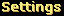
<style>
.page{position:relative;width:64px;height:16px;background:#000000}
.page>*{position:absolute;margin:0}
.t1{font:13px "Meiryo";color:#f0f080;font-weight:bold}
</style>
<div class="page">
<p class="t1" style="left:2px;top:1px;width:58px;height:13px">Settings</p>
</div>
